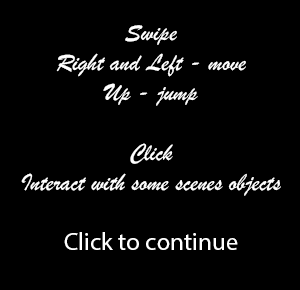
<style>
.page{position:relative;width:300px;height:290px;background:#000000}
.page>*{position:absolute;margin:0}
.t1{font:25px "BrushScriptMT";color:#ffffff}
.t2{font:25px "MyriadPro-Regular";color:#ffffff}
</style>
<div class="page">
<p class="t1" style="left:21px;top:25px;width:260px;height:225px;text-align:center">Swipe<br>Right and Left - move<br>Up - jump<br><br>Click<br>Interact with some scenes objects<br><br><span class="t2">Click to continue</span></p>
</div>
